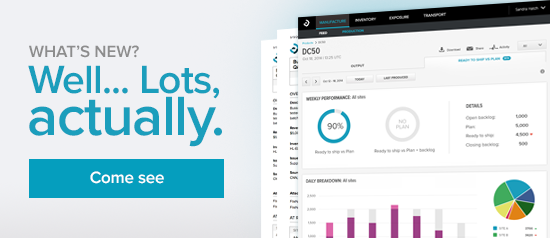
<style>
.page{position:relative;width:550px;height:238px;background:#ffffff}
.page>*{position:absolute;margin:0}
.t1{font:17px "ProximaNova-Semibold";letter-spacing:-0.006em;color:#8d8d8d}
.t2{font:40.8px "ProximaNova-Semibold";letter-spacing:-0.022em;color:#1b9ebc}
.t3{font:57.4px "ProximaNova-Semibold";letter-spacing:-0.022em;color:#1b9ebc}
.t4{font:17px "ProximaNova-Semibold";letter-spacing:-0.012em;color:#ffffff}
</style>
<div class="page">
<p class="t1" style="left:29px;top:45px;width:110px;height:13px">WHAT’S NEW?</p>
<p class="t2" style="left:28px;top:65px;width:191px;height:34px">Well... Lots,</p>
<p class="t3" style="left:29px;top:96px;width:193px;height:51px">actually.</p>
<p class="t4" style="left:90px;top:171px;width:74px;height:13px">Come see</p>
</div>
